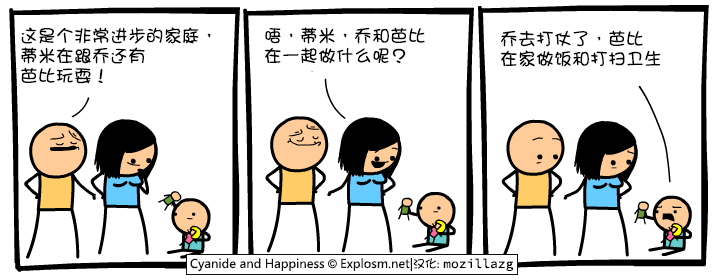
<style>
.page{position:relative;width:720px;height:280px;background:#ffffff}
.page>*{position:absolute;margin:0}
.t1{font:18px/20px "DFGirl";color:#000000}
</style>
<div class="page">
<p class="t1" style="left:21px;top:27px;width:190px;height:57px">这是个非常进步的家庭，<br>蒂米在跟乔还有<br>芭比玩耍！</p>
<p class="t1" style="left:265px;top:27px;width:160px;height:37px">唔，蒂米，乔和芭比<br>在一起做什么呢？</p>
<p class="t1" style="left:501px;top:30px;width:160px;height:37px">乔去打仗了，芭比<br>在家做饭和打扫卫生</p>
</div>
